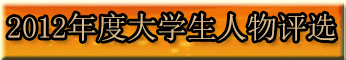
<style>
.page{position:relative;width:346px;height:60px}
.page>*{position:absolute;margin:0}
.t1{font:30px "SimSun";color:#e0bf8e}
</style>
<div class="page">
<p class="t1" style="left:8px;top:13px;width:328px;height:28px">2012年度大学生人物评选</p>
</div>
